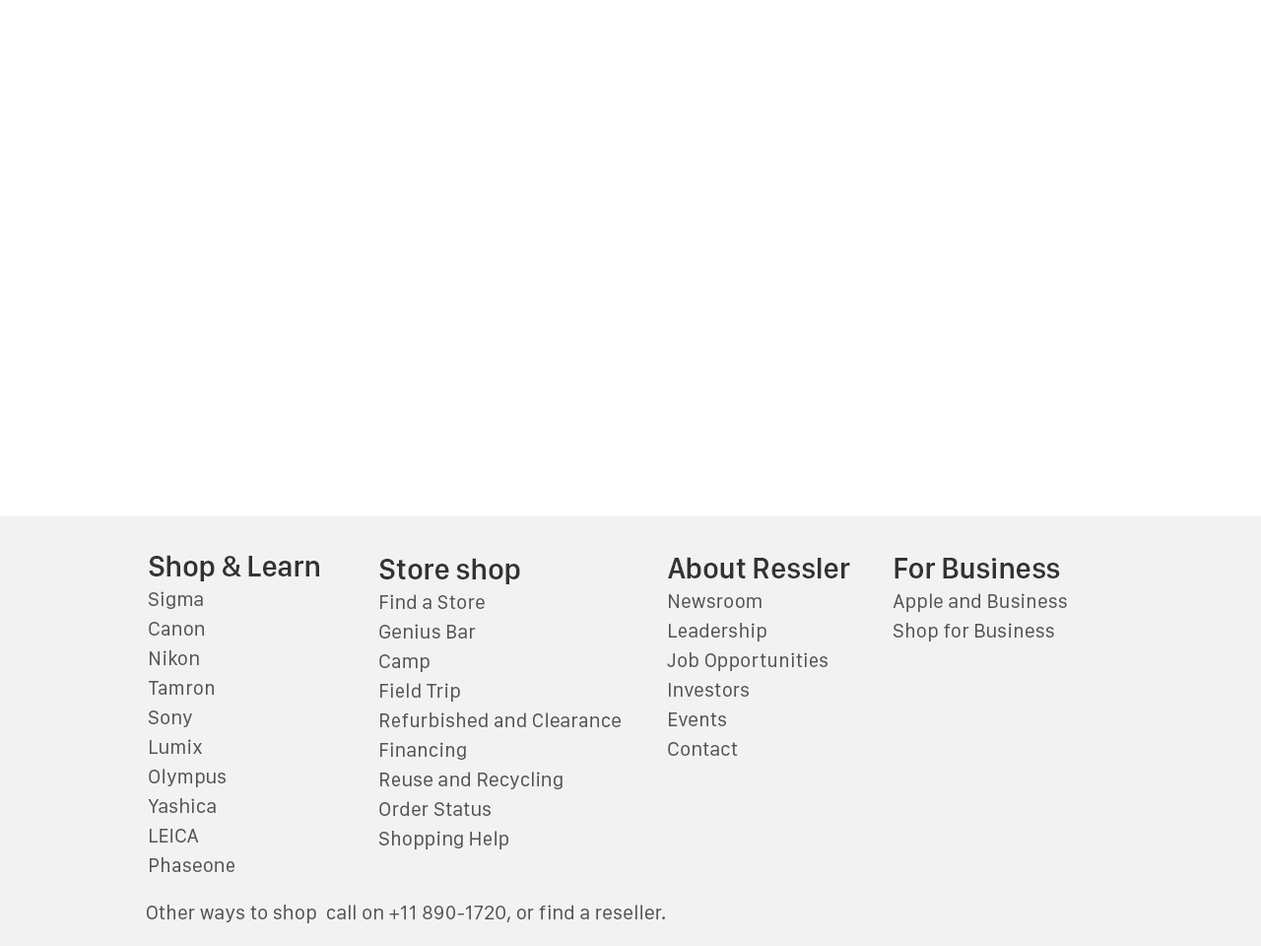
<style>
.page{position:relative;width:1261px;height:946px;background:#ffffff}
.page>*{position:absolute;margin:0}
.t1{font:19.7px/29.6px "SanFranciscoText-Regular";color:#555555}
.t2{font:29.6px "SanFranciscoDisplay-Semibold";color:#333333}
.t3{font:19.7px "SanFranciscoText-Regular";color:#555555}
</style>
<div class="page">
<p class="t1" style="left:148px;top:555px;width:171px;height:317px"><span class="t2">Shop &amp; Learn<br></span>Sigma<br>Canon<br>Nikon<br>Tamron<br>Sony<br>Lumix<br>Olympus<br>Yashica<br>LEICA<br>Phaseone</p>
<p class="t1" style="left:378px;top:558px;width:243px;height:291px"><span class="t2">Store shop <br></span>Find a Store<br>Genius Bar<br>Camp<br>Field Trip<br>Refurbished and Clearance<br>Financing<br>Reuse and Recycling<br>Order Status<br>Shopping Help</p>
<p class="t1" style="left:667px;top:557px;width:183px;height:199px"><span class="t2">About Ressler<br></span>Newsroom<br>Leadership<br>Job Opportunities<br>Investors<br>Events<br>Contact</p>
<p class="t1" style="left:892px;top:558px;width:175px;height:83px"><span class="t2">For Business<br></span>Apple and Business<br>Shop for Business</p>
<p class="t3" style="left:147px;top:904px;width:518px;height:19px">Other ways to shop  call on +11 890-1720, or find a reseller.</p>
</div>
